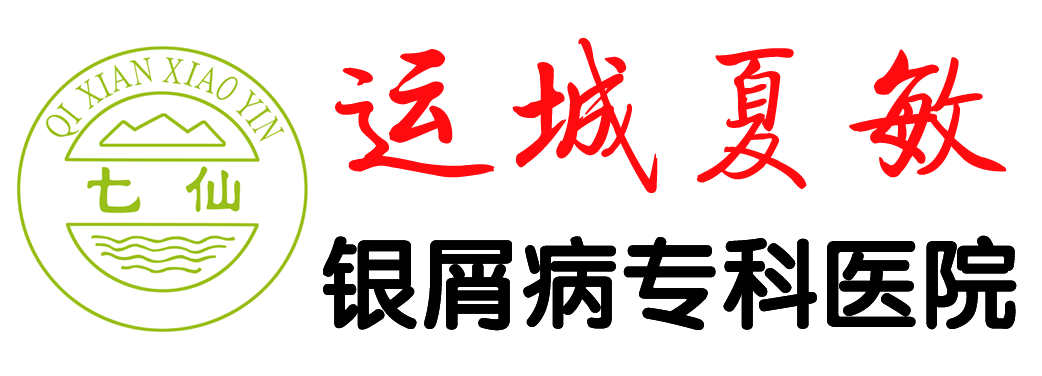
<style>
.page{position:relative;width:1042px;height:376px;background:#ffffff}
.page>*{position:absolute;margin:0}
.t1{font:166.7px "JQiTi";color:#ff0a0f;font-weight:bold}
.t2{font:100px "FZY4JW--GB1-0";color:#000000}
</style>
<div class="page">
<p class="t1" style="left:335px;top:37px;width:672px;height:156px">运城夏敏</p>
<p class="t2" style="left:323px;top:235px;width:694px;height:96px">银屑病专科医院</p>
</div>
